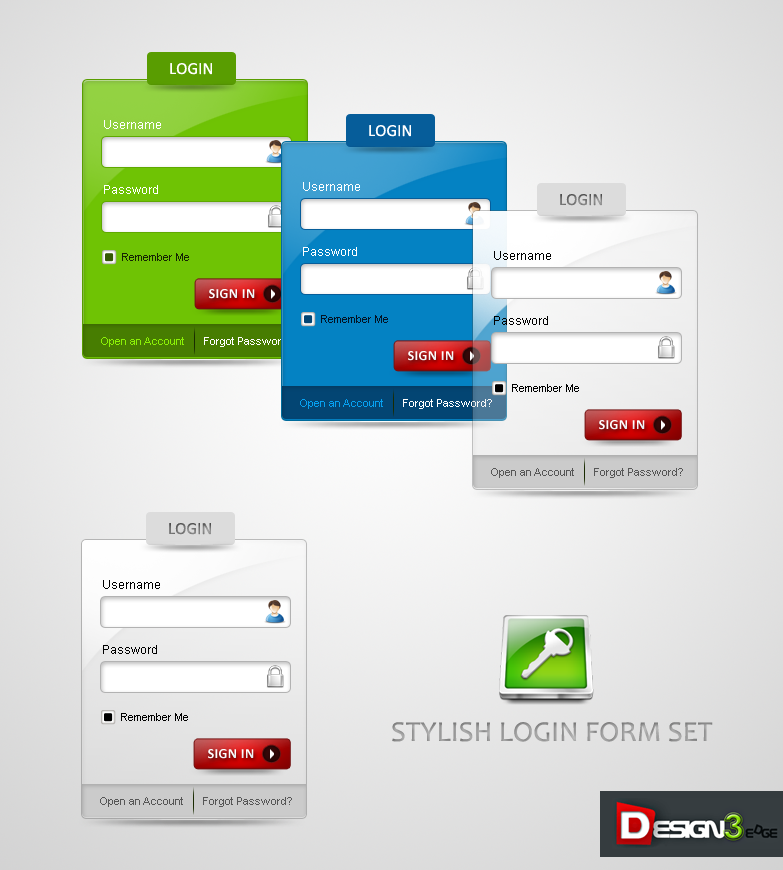
<style>
.page{position:relative;width:783px;height:870px}
.page>*{position:absolute;margin:0}
.t1{font:17px "Calibri";color:#ffffff}
.t2{font:12px "ArialMT";color:#ffffff}
.t3{font:17px "Calibri"}
.t4{font:11px "ArialMT";color:#162304}
.t5{font:12px "ArialMT";color:#000000}
.t6{font:13.8px "Calibri-Bold";letter-spacing:0.03em;color:#ffffff}
.t7{font:11px "ArialMT";color:#041323}
.t8{font:11px "ArialMT";color:#8bf106}
.t9{font:11px "ArialMT";color:#ffffff}
.t10{font:11px "ArialMT";color:#000000}
.t11{font:11px "ArialMT";color:#06a1f1}
.t12{font:11px "ArialMT";color:#565656}
.t13{font:29px "Candara";color:#9a9a9a}
</style>
<div class="page">
<p class="t1" style="left:170px;top:63px;width:42px;height:12px">LOGIN</p>
<p class="t2" style="left:104px;top:120px;width:57px;height:9px">Username</p>
<p class="t1" style="left:369px;top:125px;width:42px;height:12px">LOGIN</p>
<p class="t2" style="left:104px;top:185px;width:54px;height:9px">Password</p>
<p class="t2" style="left:303px;top:182px;width:57px;height:9px">Username</p>
<p class="t3" style="left:560px;top:194px;width:42px;height:12px">LOGIN</p>
<p class="t4" style="left:122px;top:253px;width:67px;height:8px">Remember Me</p>
<p class="t2" style="left:303px;top:247px;width:54px;height:9px">Password</p>
<p class="t5" style="left:494px;top:251px;width:57px;height:9px">Username</p>
<p class="t6" style="left:209px;top:289px;width:46px;height:10px">SIGN IN</p>
<p class="t7" style="left:321px;top:315px;width:67px;height:8px">Remember Me</p>
<p class="t5" style="left:494px;top:316px;width:54px;height:9px">Password</p>
<p class="t8" style="left:101px;top:337px;width:83px;height:10px">Open an Account</p>
<p class="t9" style="left:204px;top:337px;width:89px;height:10px">Forgot Password?</p>
<p class="t6" style="left:408px;top:351px;width:46px;height:10px">SIGN IN</p>
<p class="t10" style="left:512px;top:384px;width:67px;height:8px">Remember Me</p>
<p class="t11" style="left:300px;top:399px;width:83px;height:10px">Open an Account</p>
<p class="t9" style="left:403px;top:399px;width:89px;height:10px">Forgot Password?</p>
<p class="t6" style="left:599px;top:420px;width:46px;height:10px">SIGN IN</p>
<p class="t12" style="left:491px;top:468px;width:83px;height:10px">Open an Account</p>
<p class="t12" style="left:594px;top:468px;width:89px;height:10px">Forgot Password?</p>
<p class="t3" style="left:169px;top:523px;width:42px;height:12px">LOGIN</p>
<p class="t5" style="left:103px;top:580px;width:57px;height:9px">Username</p>
<p class="t5" style="left:103px;top:645px;width:54px;height:9px">Password</p>
<p class="t10" style="left:121px;top:713px;width:67px;height:8px">Remember Me</p>
<p class="t13" style="left:392px;top:722px;width:321px;height:20px">STYLISH LOGIN FORM SET</p>
<p class="t6" style="left:208px;top:749px;width:46px;height:10px">SIGN IN</p>
<p class="t12" style="left:100px;top:797px;width:83px;height:10px">Open an Account</p>
<p class="t12" style="left:203px;top:797px;width:89px;height:10px">Forgot Password?</p>
</div>
